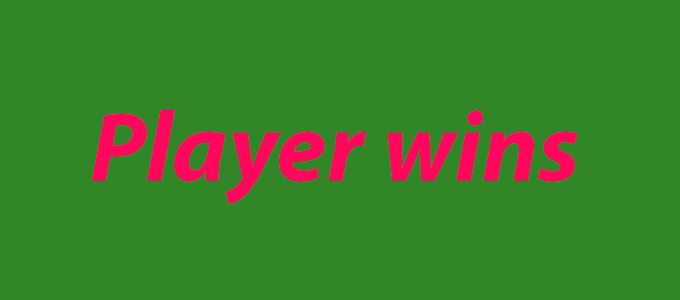
<style>
.page{position:relative;width:680px;height:300px;background:#318727}
.page>*{position:absolute;margin:0}
.t1{font:100px "MyriadPro-BoldIt";color:#fd075d}
</style>
<div class="page">
<p class="t1" style="left:91px;top:110px;width:487px;height:95px">Player wins</p>
</div>
